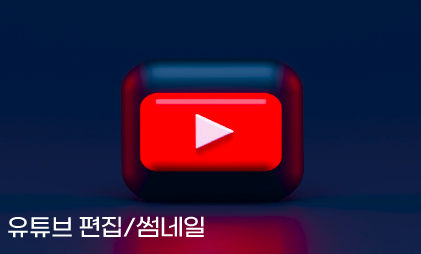
<style>
.page{position:relative;width:421px;height:254px}
.page>*{position:absolute;margin:0}
.t1{font:24px "SBAggroL";color:#ffffff}
</style>
<div class="page">
<p class="t1" style="left:8px;top:216px;width:196px;height:22px">유튜브 편집/썸네일</p>
</div>
